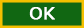
<style>
.page{position:relative;width:84px;height:28px;background:#116712}
.page>*{position:absolute;margin:0}
.t1{font:17px "Verdana";color:#ffffff;font-weight:bold}
</style>
<div class="page">
<p class="t1" style="left:29px;top:7px;width:26px;height:13px">OK</p>
</div>
